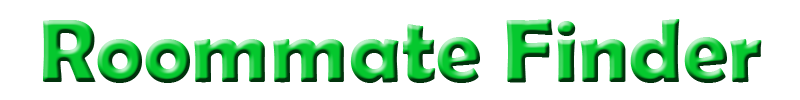
<style>
.page{position:relative;width:800px;height:100px;background:#ffffff}
.page>*{position:absolute;margin:0}
.t1{font:90px "BerlinSansFBDemi-Bold"}
</style>
<div class="page">
<p class="t1" style="left:43px;top:19px;width:719px;height:64px">Roommate Finder</p>
</div>
